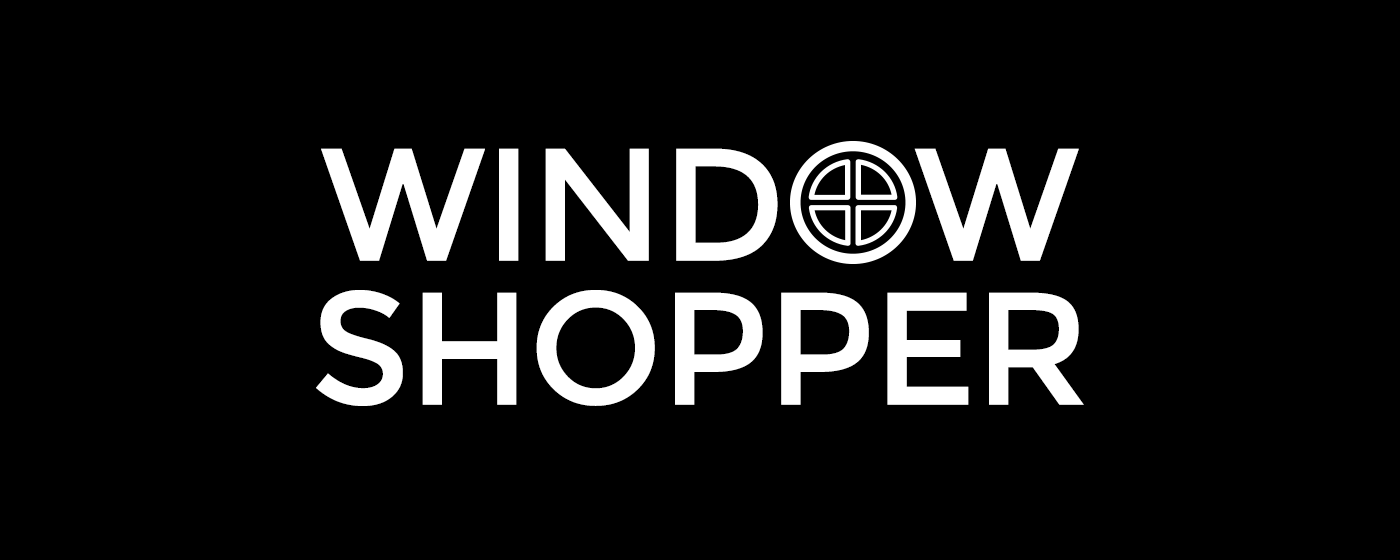
<style>
.page{position:relative;width:1400px;height:560px;background:#000000}
.page>*{position:absolute;margin:0}
.t1{font:160px/48px "Montserrat-Regular";letter-spacing:-0.02em;color:#ffffff}
.t2{font:160px/48px "Montserrat-Regular";letter-spacing:-0.02em;color:#000000}
</style>
<div class="page">
<p class="t1" style="left:316px;top:146px;width:768px;height:260px;text-align:center">WIND<span class="t2">O</span>W<br><br><br>SHOPPER</p>
</div>
